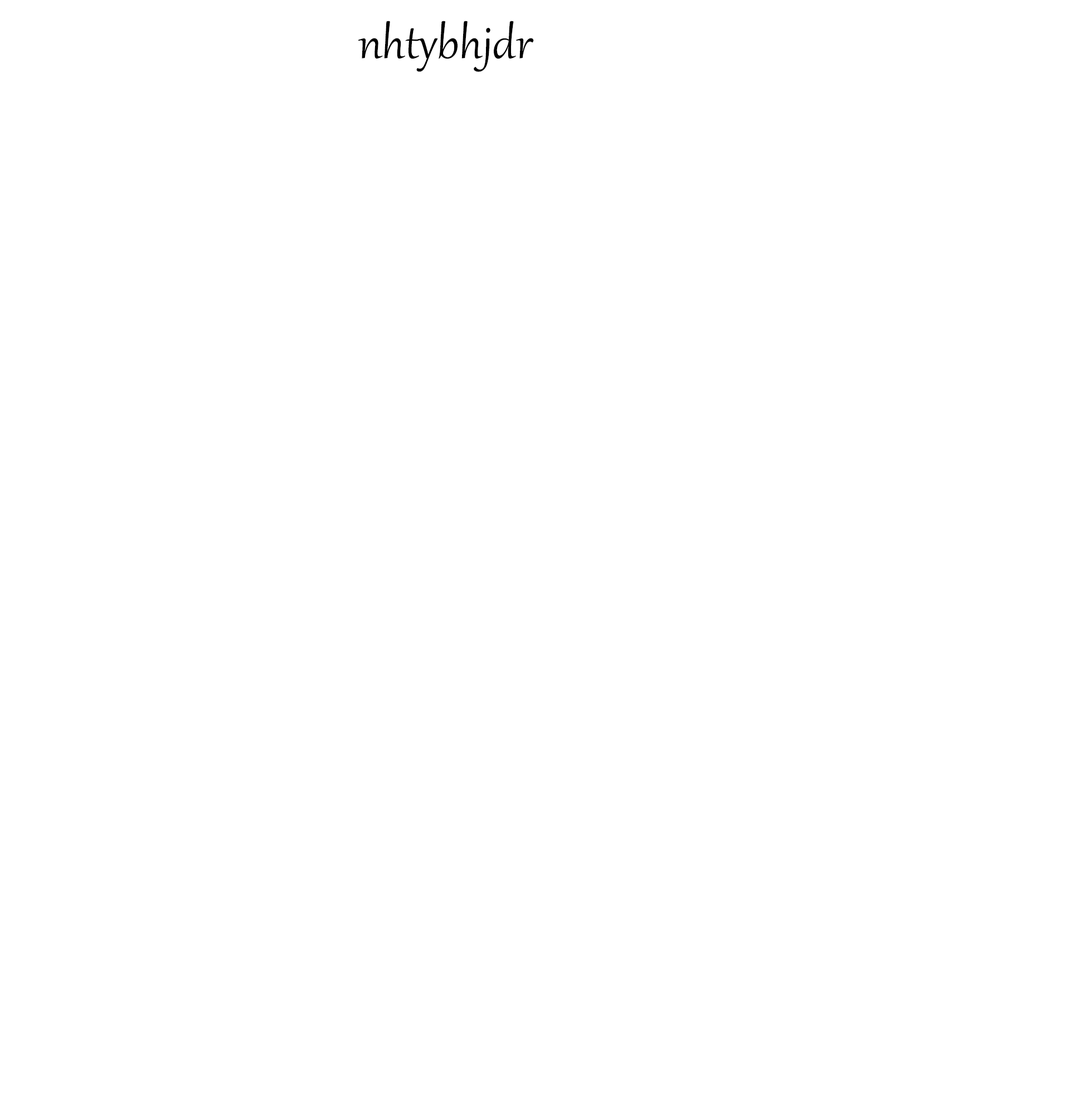
<style>
.page{position:relative;width:1070px;height:1115px;background:#ffffff}
.page>*{position:absolute;margin:0}
.t1{font:55.7px "Gabriola";color:#000000}
</style>
<div class="page">
<p class="t1" style="left:358px;top:21px;width:176px;height:51px">nhtybhjdr</p>
</div>
